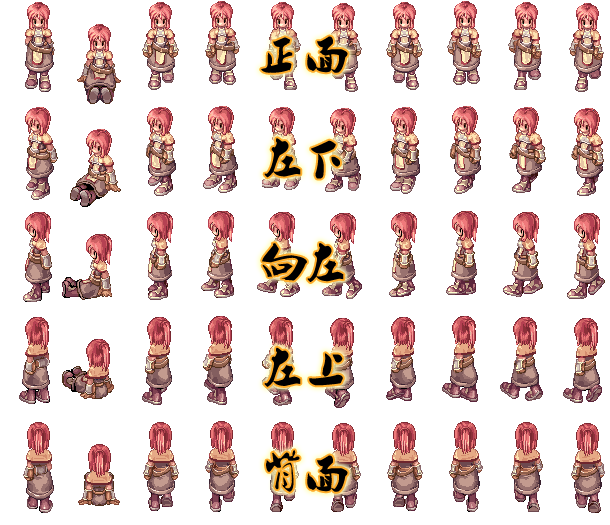
<style>
.page{position:relative;width:610px;height:525px;background:#ffffff}
.page>*{position:absolute;margin:0}
.t1{font:43px/104.7px "Ò¶¸ùÓÑÐÐÊé·±";color:#000000}
</style>
<div class="page">
<p class="t1" style="left:261px;top:36px;width:87px;height:456px">正面<br>左下<br>向左<br>左上<br>背面</p>
</div>
